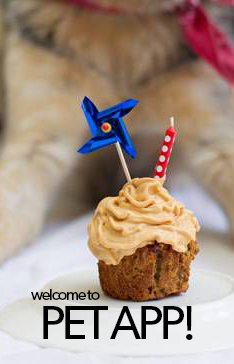
<style>
.page{position:relative;width:234px;height:364px}
.page>*{position:absolute;margin:0}
.t1{font:16px "Gibson-Regular";letter-spacing:-0.075em;color:#000000}
.t2{font:48px "Gibson-Regular";letter-spacing:-0.075em;color:#000000}
</style>
<div class="page">
<p class="t1" style="left:31px;top:289px;width:69px;height:11px">welcome to</p>
<p class="t2" style="left:43px;top:306px;width:150px;height:34px">PET APP!</p>
</div>
